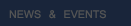
<style>
.page{position:relative;width:131px;height:26px;background:#19253a}
.page>*{position:absolute;margin:0}
.t1{font:17px "Kartika";color:#535454}
</style>
<div class="page">
<p class="t1" style="left:9px;top:10px;width:97px;height:9px">NEWS &amp; EVENTS</p>
</div>
